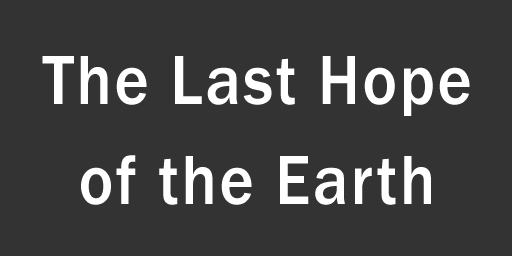
<style>
.page{position:relative;width:512px;height:256px;background:#333333}
.page>*{position:absolute;margin:0}
.t1{font:72px/100px "FranklinGothic-Medium";letter-spacing:0.04em;color:#ffffff;scale:0.91 1}
</style>
<div class="page">
<p class="t1" style="left:42px;top:56px;width:428px;height:149px;text-align:center">The Last Hope<br>of the Earth</p>
</div>
